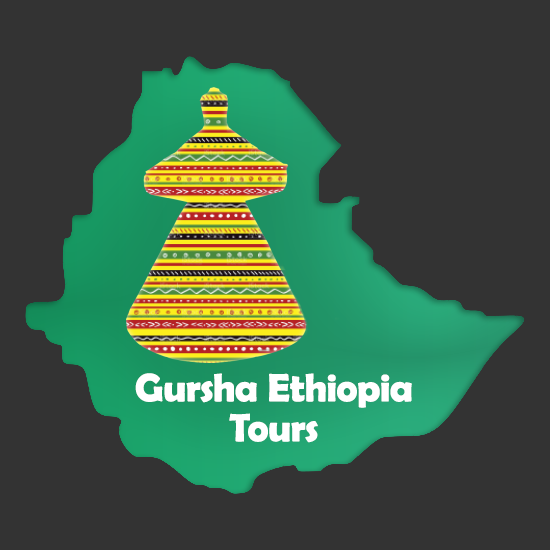
<style>
.page{position:relative;width:550px;height:550px;background:#333333}
.page>*{position:absolute;margin:0}
.t1{font:40px/40px "BerlinSansFBDemi-Bold";letter-spacing:-0.01em;color:#ffffff}
</style>
<div class="page">
<p class="t1" style="left:135px;top:373px;width:277px;height:70px;text-align:center">Gursha Ethiopia<br> Tours</p>
</div>
